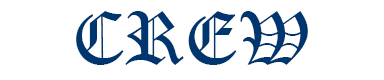
<style>
.page{position:relative;width:384px;height:80px;background:#ffffff}
.page>*{position:absolute;margin:0}
.t1{font:72px "OldEnglishTextMT";color:#00366f;text-transform:uppercase}
</style>
<div class="page">
<p class="t1" style="left:76px;top:11px;width:232px;height:54px">CRew</p>
</div>
